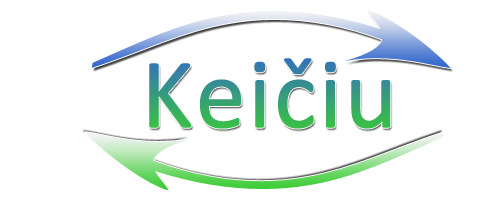
<style>
.page{position:relative;width:500px;height:200px;background:#ffffff}
.page>*{position:absolute;margin:0}
.t1{font:100px "Calibri";font-weight:bold}
</style>
<div class="page">
<p class="t1" style="left:149px;top:58px;width:242px;height:71px">Keičiu</p>
</div>
